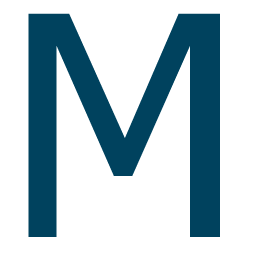
<style>
.page{position:relative;width:256px;height:256px;background:#ffffff}
.page>*{position:absolute;margin:0}
.t1{font:307.2px "Tahoma";color:#00425e}
</style>
<div class="page">
<p class="t1" style="left:28px;top:13px;width:192px;height:224px">M</p>
</div>
